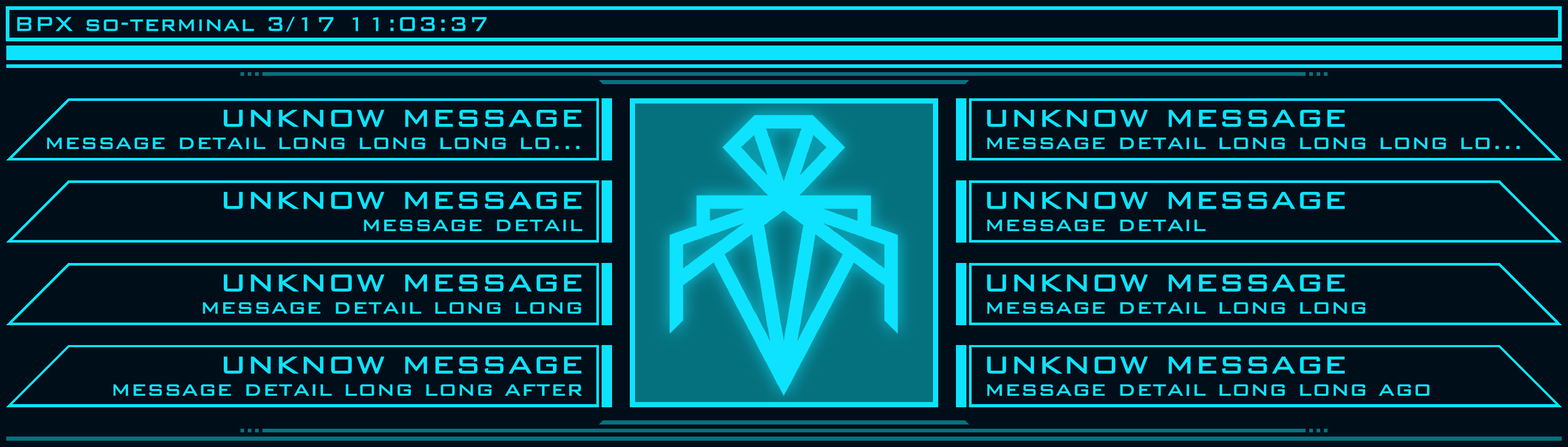
<style>
.page{position:relative;width:1568px;height:447px;background:#000e1a}
.page>*{position:absolute;margin:0}
.t1{font:26.1px "BankGothicBT-Light";color:#0de3fe;font-weight:bold}
.t2{font:39.2px "BankGothicBT-Light";color:#0de3fe;font-weight:bold}
</style>
<div class="page">
<p class="t1" style="left:17px;top:17px;width:470px;height:15px">BPX so-terminal 3/17 11:03:37</p>
<p class="t2" style="left:224px;top:110px;width:358px;height:17px">unknow message</p>
<p class="t2" style="left:987px;top:110px;width:358px;height:17px">unknow message</p>
<p class="t1" style="left:47px;top:137px;width:533px;height:12px">message detail long long long lo...</p>
<p class="t1" style="left:987px;top:137px;width:533px;height:12px">message detail long long long lo...</p>
<p class="t2" style="left:224px;top:192px;width:358px;height:17px">unknow message</p>
<p class="t2" style="left:987px;top:192px;width:358px;height:17px">unknow message</p>
<p class="t1" style="left:364px;top:220px;width:218px;height:11px">message detail</p>
<p class="t1" style="left:987px;top:220px;width:219px;height:11px">message detail</p>
<p class="t2" style="left:224px;top:274px;width:358px;height:18px">unknow message</p>
<p class="t2" style="left:987px;top:274px;width:358px;height:18px">unknow message</p>
<p class="t1" style="left:203px;top:302px;width:378px;height:12px">message detail long long</p>
<p class="t1" style="left:987px;top:302px;width:378px;height:12px">message detail long long</p>
<p class="t2" style="left:224px;top:356px;width:358px;height:18px">unknow message</p>
<p class="t2" style="left:987px;top:356px;width:358px;height:18px">unknow message</p>
<p class="t1" style="left:113px;top:384px;width:469px;height:12px">message detail long long after</p>
<p class="t1" style="left:987px;top:384px;width:442px;height:12px">message detail long long ago</p>
</div>
